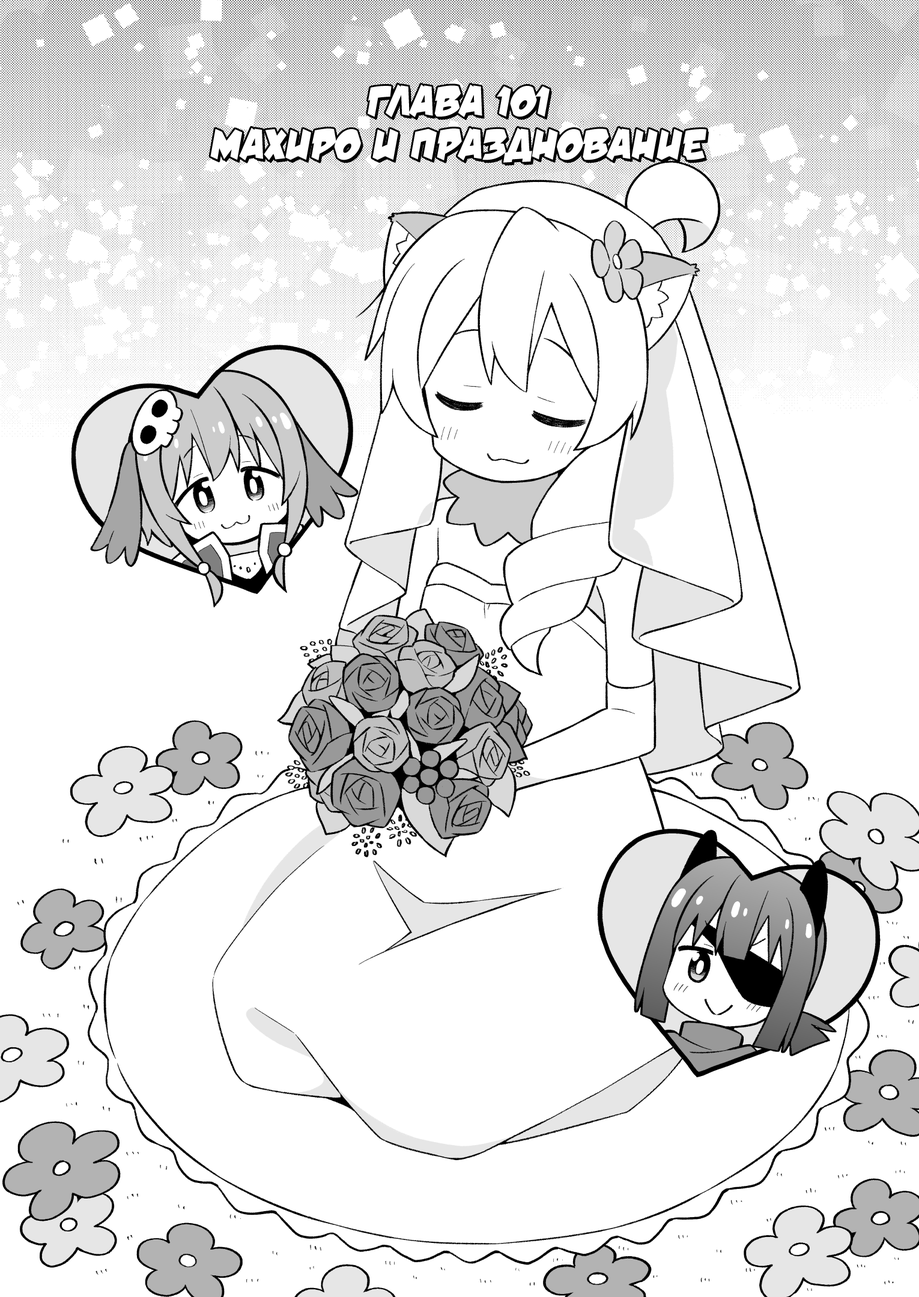
<style>
.page{position:relative;width:919px;height:1297px;background:#ffffff}
.page>*{position:absolute;margin:0}
.t1{font:43.2px "v_DamnNoisyKids";color:#ffffff;text-transform:uppercase}
</style>
<div class="page">
<p class="t1" style="left:210px;top:84px;width:496px;height:79px;text-align:center">Глава 101<br>Махиро и празднование</p>
</div>
